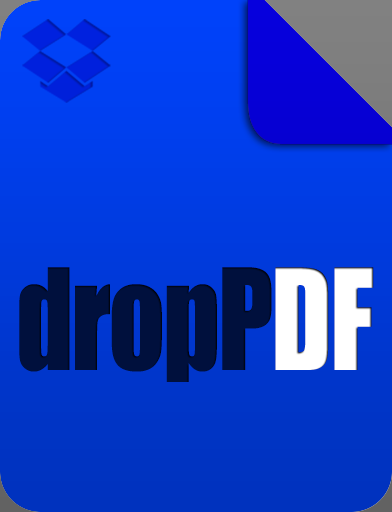
<style>
.page{position:relative;width:392px;height:512px}
.page>*{position:absolute;margin:0}
.t1{font:130px "Impact";letter-spacing:-0.02em;color:#00103d;scale:0.85 1}
.t2{font:130px "Impact";letter-spacing:-0.02em;color:#ffffff;scale:0.85 1}
</style>
<div class="page">
<p class="t1" style="left:19px;top:267px;width:355px;height:115px">dropP<span class="t2">DF</span></p>
</div>
